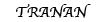
<style>
.page{position:relative;width:108px;height:22px;background:#ffffff}
.page>*{position:absolute;margin:0}
.t1{font:15px "Apple-Chancery";color:#000000}
</style>
<div class="page">
<p class="t1" style="left:16px;top:4px;width:75px;height:14px">TRANAN</p>
</div>
